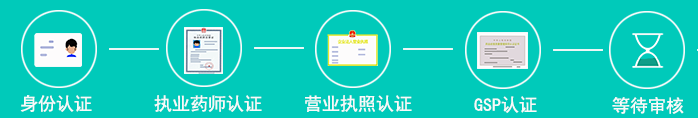
<style>
.page{position:relative;width:698px;height:118px;background:#00caba}
.page>*{position:absolute;margin:0}
.t1{font:18px "SimHei";color:#f8fafa}
</style>
<div class="page">
<p class="t1" style="left:20px;top:95px;width:72px;height:17px">身份认证</p>
<p class="t1" style="left:154px;top:95px;width:108px;height:17px">执业药师认证</p>
<p class="t1" style="left:305px;top:95px;width:107px;height:17px">营业执照认证</p>
<p class="t1" style="left:474px;top:96px;width:63px;height:17px">GSP认证</p>
<p class="t1" style="left:612px;top:97px;width:72px;height:17px">等待审核</p>
</div>
